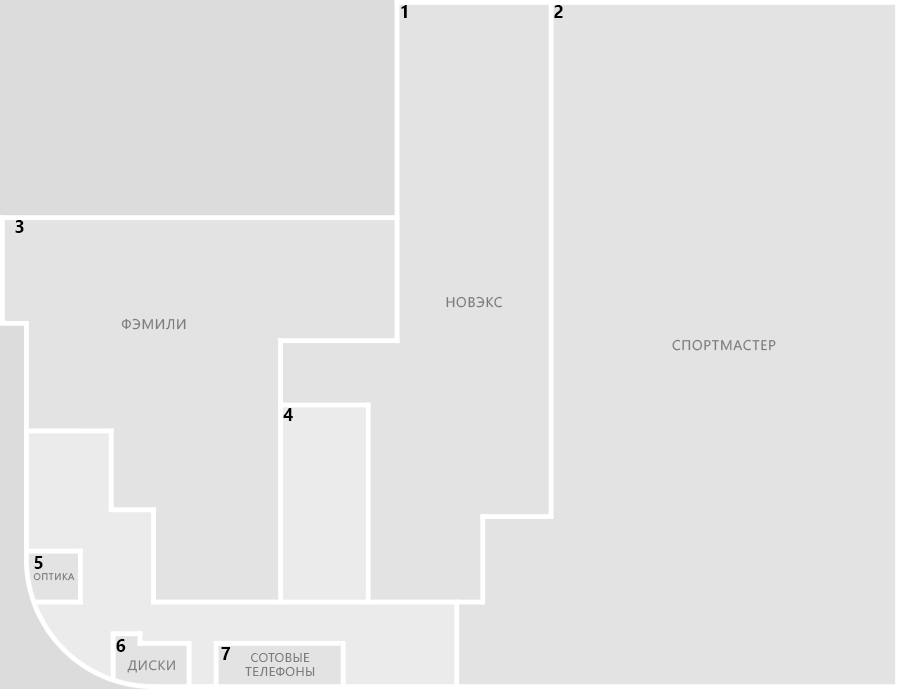
<style>
.page{position:relative;width:900px;height:689px;background:#e3e3e3}
.page>*{position:absolute;margin:0}
.t1{font:18px "SegoeUI-Bold";letter-spacing:0.05em;color:#000000;text-transform:uppercase}
.t2{font:14px "SegoeUI";letter-spacing:0.05em;color:#7c7c7c;text-transform:uppercase}
.t3{font:9.6px "SegoeUI";letter-spacing:0.05em;text-transform:uppercase}
.t4{font:12.5px "SegoeUI";letter-spacing:0.05em;color:#7c7c7c;text-transform:uppercase}
.t5{font:13.5px "SegoeUI";letter-spacing:0.05em;color:#7c7c7c;text-transform:uppercase}
</style>
<div class="page">
<p class="t1" style="left:401px;top:5px;width:6px;height:13px">1</p>
<p class="t1" style="left:554px;top:5px;width:9px;height:13px">2</p>
<p class="t1" style="left:15px;top:220px;width:9px;height:13px">3</p>
<p class="t2" style="left:446px;top:296px;width:56px;height:12px">Новэкс</p>
<p class="t2" style="left:121px;top:318px;width:65px;height:12px">Фэмили</p>
<p class="t2" style="left:672px;top:339px;width:104px;height:12px">Спортмастер</p>
<p class="t1" style="left:283px;top:408px;width:10px;height:13px">4</p>
<p class="t1" style="left:34px;top:556px;width:9px;height:13px">5</p>
<p class="t3" style="left:33px;top:573px;width:42px;height:8px">Оптика</p>
<p class="t1" style="left:116px;top:639px;width:10px;height:13px">6</p>
<p class="t1" style="left:221px;top:647px;width:10px;height:13px">7</p>
<p class="t4" style="left:245px;top:653px;width:70px;height:23px;text-align:center">Сотовые<br>телефоны</p>
<p class="t5" style="left:127px;top:660px;width:48px;height:13px">Диски</p>
</div>
